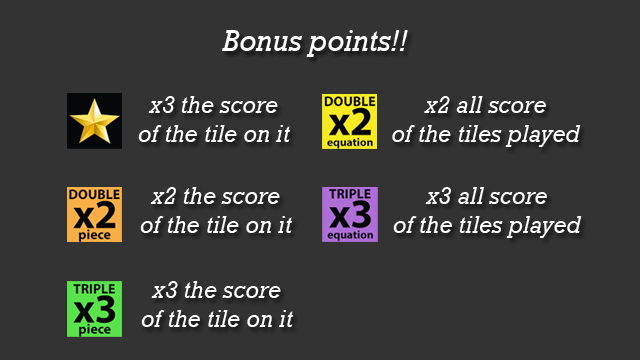
<style>
.page{position:relative;width:640px;height:360px;background:#333333}
.page>*{position:absolute;margin:0}
.t1{font:30px "Rockwell-Italic";color:#ffffff}
.t2{font:24px "Rockwell-Italic";color:#ffffff}
</style>
<div class="page">
<p class="t1" style="left:222px;top:30px;width:186px;height:27px">Bonus points!!</p>
<p class="t2" style="left:138px;top:96px;width:152px;height:46px;text-align:center">x3 the score<br>of the tile on it</p>
<p class="t2" style="left:392px;top:96px;width:189px;height:51px;text-align:center">x2 all score<br>of the tiles played</p>
<p class="t2" style="left:140px;top:187px;width:152px;height:46px;text-align:center">x2 the score<br>of the tile on it</p>
<p class="t2" style="left:393px;top:187px;width:189px;height:51px;text-align:center">x3 all score<br>of the tiles played</p>
<p class="t2" style="left:141px;top:281px;width:152px;height:46px;text-align:center">x3 the score<br>of the tile on it</p>
</div>
